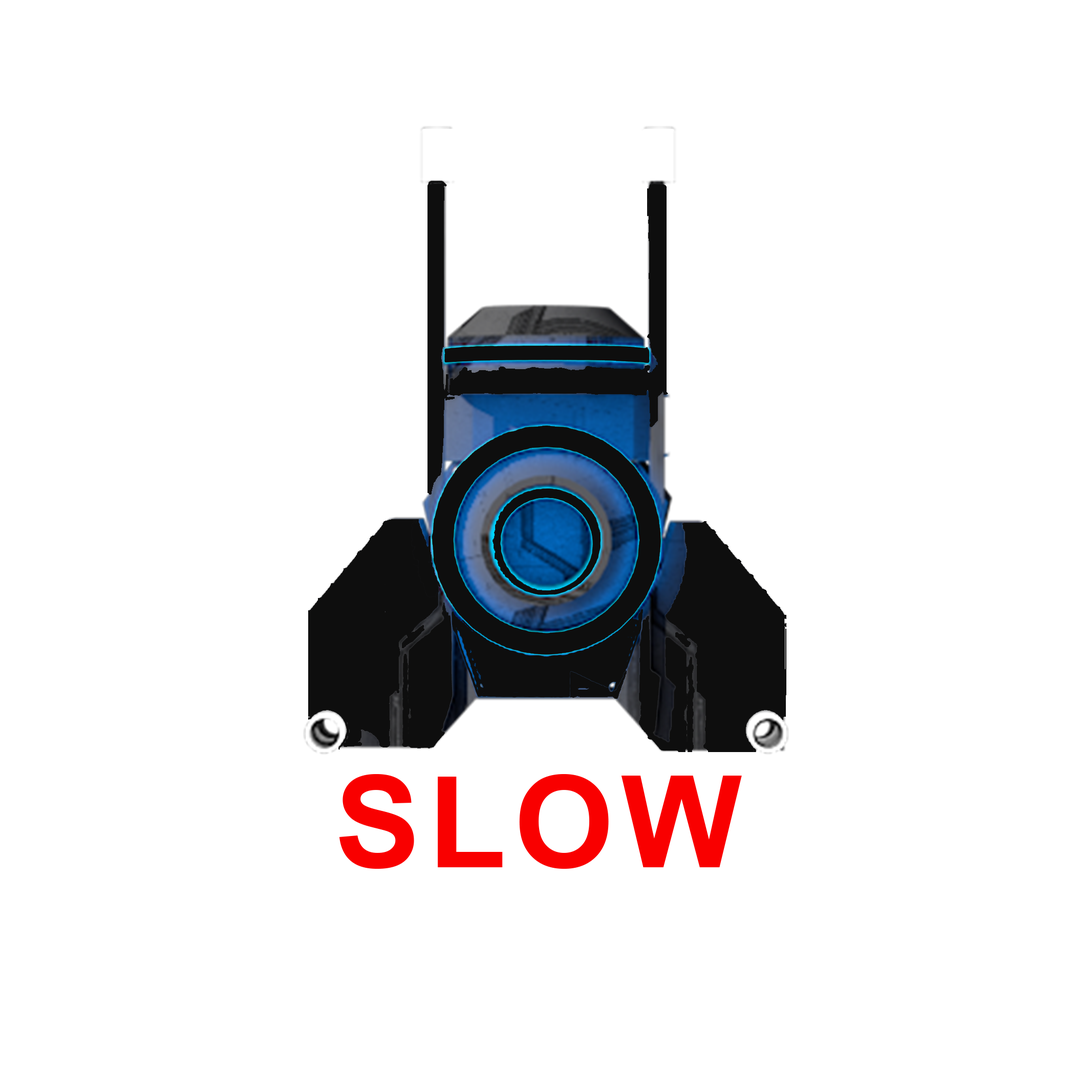
<style>
.page{position:relative;width:1092px;height:1092px;background:#ffffff}
.page>*{position:absolute;margin:0}
.t1{font:128px "Arial-BoldMT";letter-spacing:0.025em;color:#f90000;text-transform:uppercase}
</style>
<div class="page">
<p class="t1" style="left:339px;top:774px;width:403px;height:95px">SLOW</p>
</div>
